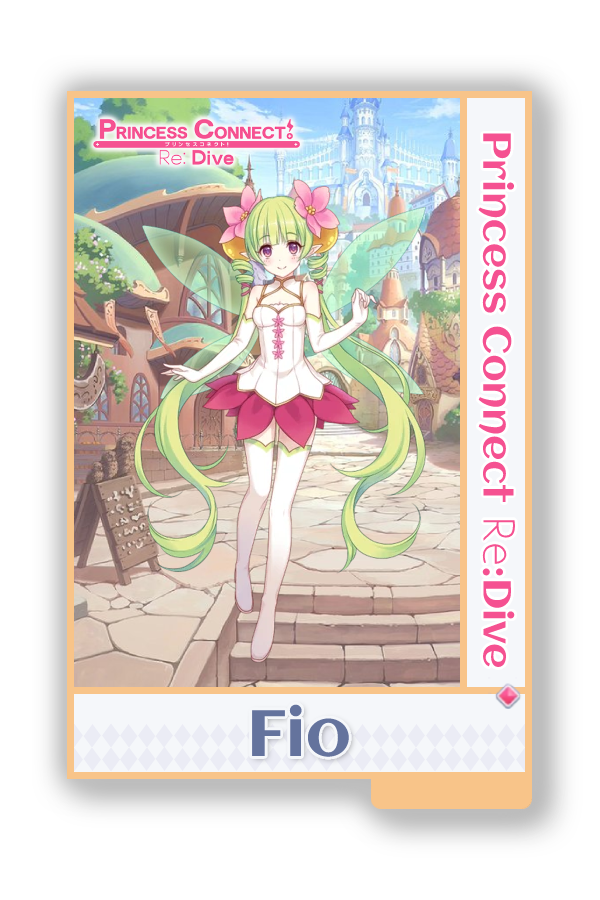
<style>
.page{position:relative;width:600px;height:900px;background:#ffffff}
.page>*{position:absolute;margin:0}
.t1{font:39px "Aclonica-Regular";color:#f55191}
.t2{font:39px "AaarghNormal";color:#f55191}
.t3{font:65px "Aclonica-Regular";color:#64739d}
</style>
<div class="page">
<p class="t1" style="left:478px;top:133px;width:38px;height:534px;rotate:90deg">Princess Connect <span class="t2">Re</span>:Dive</p>
<p class="t3" style="left:252px;top:704px;width:97px;height:53px">Fio</p>
</div>
